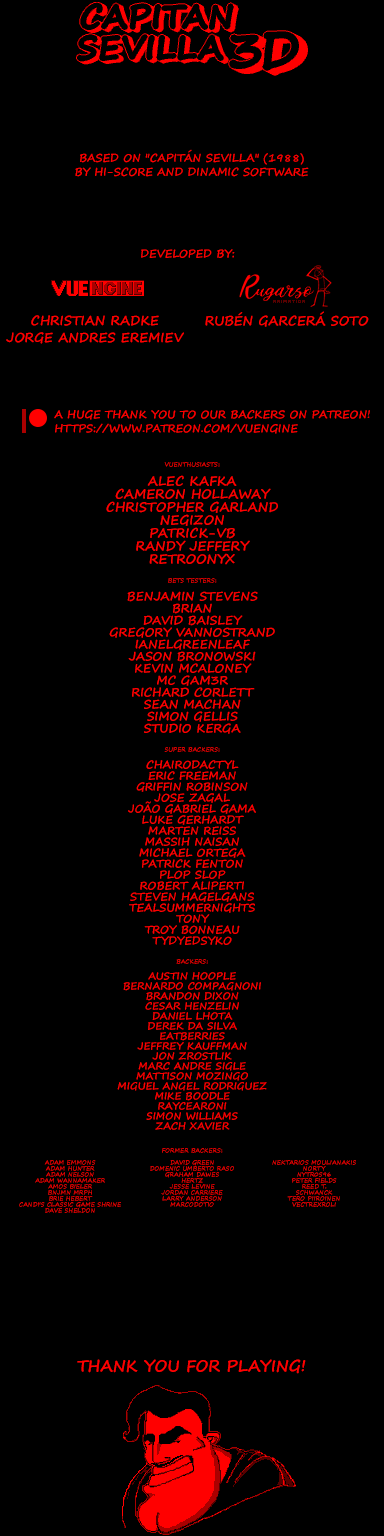
<style>
.page{position:relative;width:384px;height:1536px;background:#000000}
.page>*{position:absolute;margin:0}
.t1{font:11px/14px "SegoePrint-Bold";color:#ff0000}
.t2{font:11px "SegoePrint-Bold";color:#ff0000}
.t3{font:13px/17px "SegoePrint-Bold";color:#ff0000}
.t4{font:13px "SegoePrint-Bold";color:#ff0000}
.t5{font:13px/13px "SegoePrint-Bold";color:#ff0000}
.t6{font:6px/6px "SegoePrint-Bold";color:#ff0000}
.t7{font:12px/12px "SegoePrint-Bold";color:#ff0000}
.t8{font:11px/11px "SegoePrint-Bold";color:#ff0000}
.t9{font:10px/10px "SegoePrint-Bold";color:#ff0000}
.t10{font:6px/6px "SegoePrint-Bold"}
.t11{font:16px "SegoePrint-Bold";color:#ff0000}
</style>
<div class="page">
<p class="t1" style="left:75px;top:149px;width:234px;height:28px;text-align:center">BASED ON "CAPITÁN SEVILLA" (1988)<br>BY HI-SCORE AND DINAMIC SOFTWARE</p>
<p class="t2" style="left:141px;top:249px;width:94px;height:9px">DEVELOPED BY:</p>
<p class="t3" style="left:6px;top:315px;width:178px;height:29px;text-align:center">CHRISTIAN RADKE<br>JORGE ANDRES EREMIEV</p>
<p class="t4" style="left:205px;top:311px;width:164px;height:16px">RUBÉN GARCERÁ SOTO</p>
<p class="t1" style="left:54px;top:410px;width:316px;height:24px">A HUGE THANK YOU TO OUR BACKERS ON PATREON!<br>HTTPS://WWW.PATREON.COM/VUENGINE</p>
<p class="t5" style="left:106px;top:462px;width:172px;height:103px;text-align:center"><span class="t6">VUENTHUSIASTS:<br> <br></span>ALEC KAFKA<br>CAMERON HOLLAWAY<br>CHRISTOPHER GARLAND<br>NEGIZON<br>PATRICK-VB<br>RANDY JEFFERY<br>RETROONYX</p>
<p class="t7" style="left:109px;top:578px;width:166px;height:156px;text-align:center"><span class="t6">BETS TESTERS:<br> <br></span>BENJAMIN STEVENS<br>BRIAN<br>DAVID BAISLEY<br>GREGORY VANNOSTRAND<br>IANELGREENLEAF<br>JASON BRONOWSKI<br>KEVIN MCALONEY<br>MC GAM3R<br>RICHARD CORLETT<br>SEAN MACHAN<br>SIMON GELLIS<br>STUDIO KERGA</p>
<p class="t8" style="left:128px;top:747px;width:128px;height:198px;text-align:center"><span class="t6">SUPER BACKERS:<br> <br></span>CHAIRODACTYL<br>ERIC FREEMAN<br>GRIFFIN ROBINSON<br>JOSE ZAGAL<br>JOÃO GABRIEL GAMA<br>LUKE GERHARDT<br>MARTEN REISS<br>MASSIH NAISAN<br>MICHAEL ORTEGA<br>PATRICK FENTON<br>PLOP SLOP<br>ROBERT ALIPERTI<br>STEVEN HAGELGANS<br>TEALSUMMERNIGHTS<br>TONY<br>TROY BONNEAU<br>TYDYEDSYKO</p>
<p class="t9" style="left:117px;top:959px;width:150px;height:171px;text-align:center"><span class="t6">BACKERS:<br> <br></span>AUSTIN HOOPLE<br>BERNARDO COMPAGNONI<br>BRANDON DIXON<br>CESAR HENZELIN<br>DANIEL LHOTA<br>DEREK DA SILVA<br>EATBERRIES<br>JEFFREY KAUFFMAN<br>JON ZROSTLIK<br>MARC ANDRE SIGLE<br>MATTISON MOZINGO<br>MIGUEL ANGEL RODRIGUEZ<br>MIKE BOODLE<br>RAYCEARONI<br>SIMON WILLIAMS<br>ZACH XAVIER</p>
<p class="t6" style="left:150px;top:1148px;width:84px;height:59px;text-align:center">FORMER BACKERS:<br> <br>DAVID GREEN<br>DOMENIC UMBERTO RASO<br>GRAHAM DAWES<br>HERTZ<br>JESSE LEVINE<br>JORDAN CARRIERE<br>LARRY ANDERSON<br>MARCODOTIO</p>
<p class="t6" style="left:19px;top:1160px;width:102px;height:53px;text-align:center">ADAM EMMONS<br>ADAM HUNTER<br>ADAM NELSON<br>ADAM WANNAMAKER<br>AMOS BIELER<br>BNJMN MRPH<br>BRIE HEBERT<br>CANDI'S CLASSIC GAME SHRINE<br>DAVE SHELDON</p>
<p class="t10" style="left:272px;top:1160px;width:84px;height:47px;text-align:center">NEKTARIOS MOULIANAKIS<br>NORTY<br>NYTR0S96<br>PETER FIELDS<br>REED T.<br>SCHWANCK<br>TERO PIIROINEN<br>VECTREXROLI</p>
<p class="t11" style="left:77px;top:1359px;width:229px;height:15px">THANK YOU FOR PLAYING!</p>
</div>
